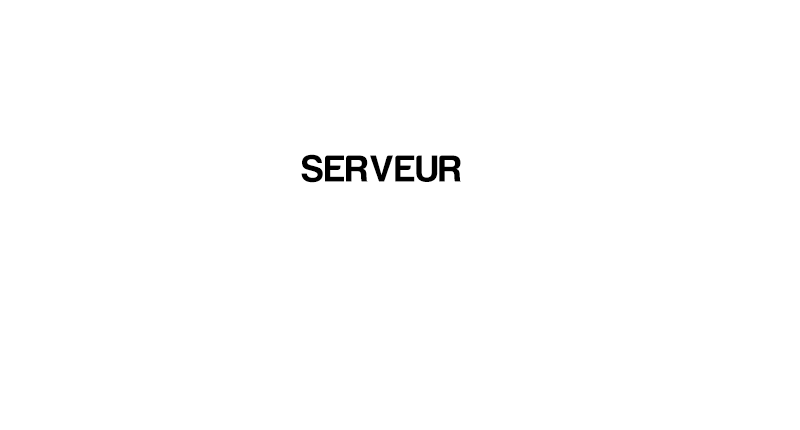
<style>
.page{position:relative;width:800px;height:430px;background:#ffffff}
.page>*{position:absolute;margin:0}
.t1{font:38.8px "Harabara";letter-spacing:0.03em;color:#000000;text-transform:uppercase}
</style>
<div class="page">
<p class="t1" style="left:301px;top:154px;width:160px;height:29px">Serveur</p>
</div>
